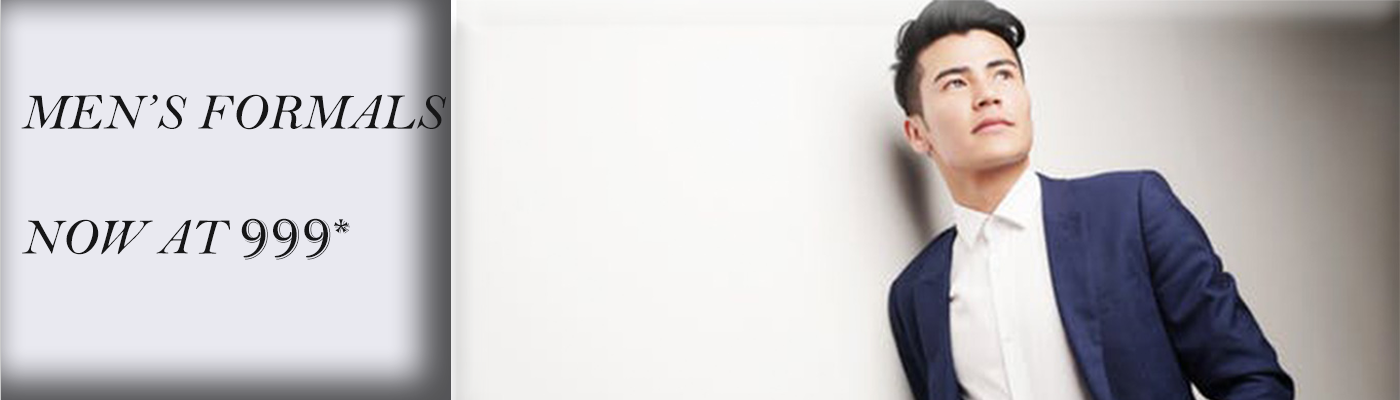
<style>
.page{position:relative;width:1400px;height:400px}
.page>*{position:absolute;margin:0}
.t1{font:52.1px "BellMTItalic";color:#161617}
.t2{font:52.1px "Algerian";color:#161617}
.t3{font:50px "Algerian";color:#161617}
</style>
<div class="page">
<p class="t1" style="left:21px;top:94px;width:425px;height:166px">MEN’S FORMALS<br><br>NOW AT <span class="t2">999</span><span class="t3">*</span></p>
</div>
